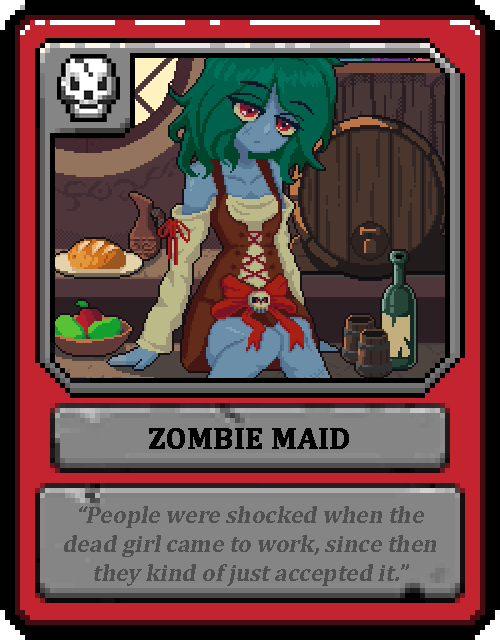
<style>
.page{position:relative;width:500px;height:640px}
.page>*{position:absolute;margin:0}
.t1{font:30px "Cambria-Bold";color:#000000;text-transform:uppercase;font-weight:bold}
.t2{font:24px "Cambria-Bold";color:#505050;font-style:italic}
</style>
<div class="page">
<p class="t1" style="left:149px;top:428px;width:200px;height:21px">Zombie maid</p>
<p class="t2" style="left:64px;top:506px;width:372px;height:80px;text-align:center">“People were shocked when the dead girl came to work, since then they kind of just accepted it.”</p>
</div>
